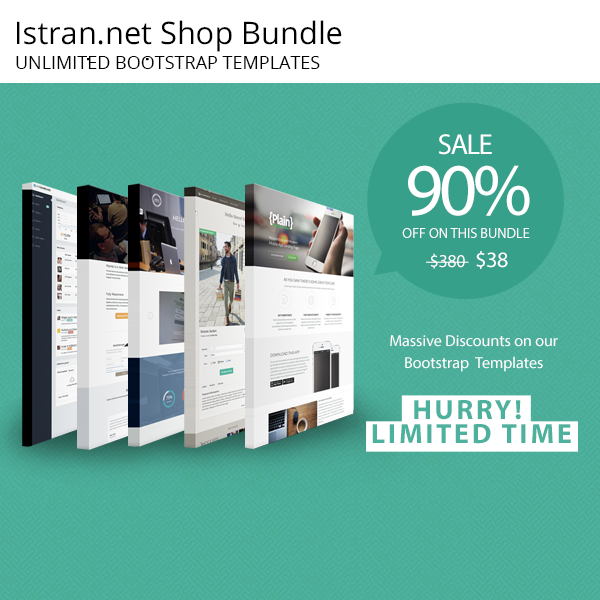
<style>
.page{position:relative;width:600px;height:600px}
.page>*{position:absolute;margin:0}
.t1{font:31px "OpenSans";color:#000000}
.t2{font:18px "OpenSans";color:#000000;text-transform:uppercase}
.t3{font:28.9px "MyriadPro-Regular";letter-spacing:-0.05em;color:#ffffff}
.t4{font:74.7px "MyriadPro-Regular";letter-spacing:-0.05em;color:#ffffff}
.t5{font:14.4px "MyriadPro-Regular";color:#ffffff}
.t6{font:17.9px "MyriadPro-Regular";letter-spacing:-0.025em;color:#ffffff}
.t7{font:21.9px "MyriadPro-Regular";letter-spacing:-0.025em;color:#ffffff}
.t8{font:15.9px "MyriadPro-Regular";color:#ffffff}
.t9{font:28px/19.5px "MyriadPro-Bold";letter-spacing:0.1em;color:#4db19d}
</style>
<div class="page">
<p class="t1" style="left:17px;top:20px;width:325px;height:32px">Istran.net Shop Bundle</p>
<p class="t2" style="left:16px;top:56px;width:304px;height:13px">Unlimited Bootstrap Templates</p>
<p class="t3" style="left:438px;top:134px;width:54px;height:21px">SALE</p>
<p class="t4" style="left:408px;top:165px;width:122px;height:51px">90%</p>
<p class="t5" style="left:402px;top:228px;width:128px;height:10px">OFF ON THIS BUNDLE</p>
<p class="t6" style="left:426px;top:251px;width:82px;height:18px">$380   <span class="t7">$38</span></p>
<p class="t8" style="left:390px;top:335px;width:168px;height:37px;text-align:center">Massive Discounts on our<br>Bootstrap  Templates</p>
<p class="t9" style="left:372px;top:400px;width:199px;height:44px;text-align:center">HURRY! <br>LIMITED TIME</p>
</div>
